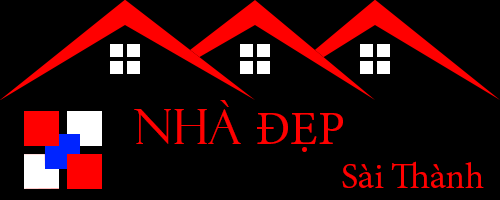
<style>
.page{position:relative;width:500px;height:200px;background:#000000}
.page>*{position:absolute;margin:0}
.t1{font:48px "FelixTitlingMT";color:#ff0000}
.t2{font:48px "MinionPro-Regular";color:#ff0000}
.t3{font:36px "MinionPro-Regular";color:#ff0000}
</style>
<div class="page">
<p class="t1" style="left:134px;top:100px;width:209px;height:52px">Nhà <span class="t2">ĐẸP</span></p>
<p class="t3" style="left:342px;top:161px;width:142px;height:27px">Sài Thành</p>
</div>
